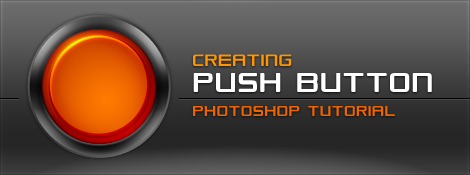
<style>
.page{position:relative;width:470px;height:175px}
.page>*{position:absolute;margin:0}
.t1{font:18px/24px "Republikaps";color:#ec6500}
.t2{font:20.4px/31.8px "Republikaps";color:#ff9600}
.t3{font:34px/26px "Republikaps";color:#ffffff}
</style>
<div class="page">
<p class="t1" style="left:193px;top:54px;width:239px;height:62px"><span class="t2">CREATING <br></span><span class="t3">PUSH BUTTON <br></span>PHOTOSHOP TUTORIAL</p>
</div>
